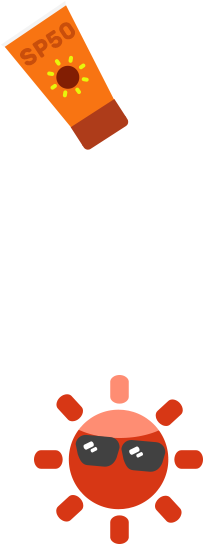
<style>
.page{position:relative;width:203px;height:544px;background:#ffffff}
.page>*{position:absolute;margin:0}
.t1{font:25.1px "Archive";letter-spacing:0.02em;color:#c94e0b}
</style>
<div class="page">
<p class="t1" style="left:20px;top:22px;width:55px;height:44px;rotate:-34deg">sp50</p>
</div>
